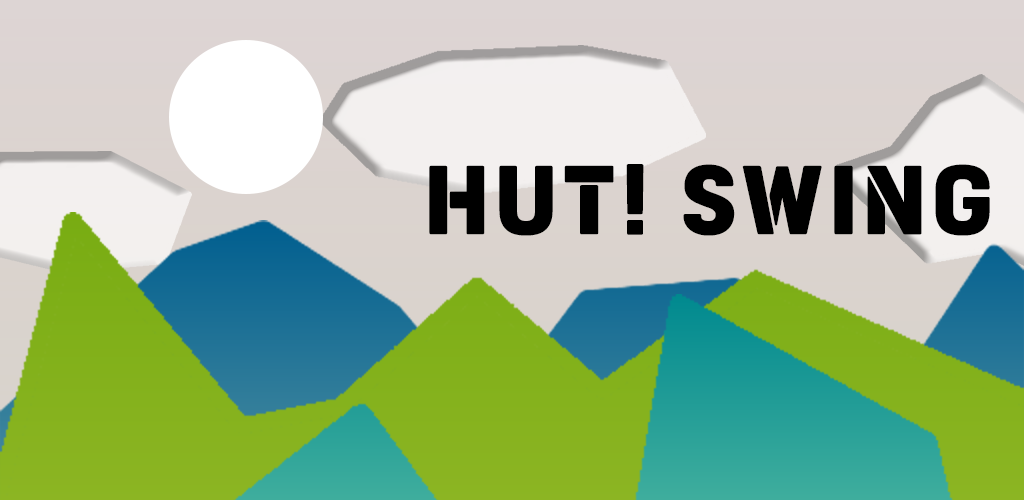
<style>
.page{position:relative;width:1024px;height:500px}
.page>*{position:absolute;margin:0}
.t1{font:87.3px "Tenada";letter-spacing:0.07em;color:#000000}
</style>
<div class="page">
<p class="t1" style="left:429px;top:164px;width:561px;height:72px">HUT! SWING</p>
</div>
